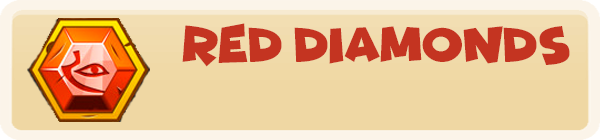
<style>
.page{position:relative;width:600px;height:140px;background:#efd7a3}
.page>*{position:absolute;margin:0}
.t1{font:50px "Funhouse";color:#c43421}
</style>
<div class="page">
<p class="t1" style="left:182px;top:23px;width:388px;height:44px">red Diamonds</p>
</div>
